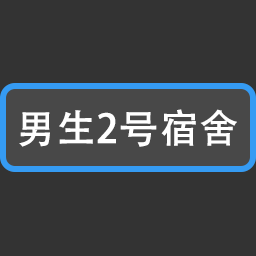
<style>
.page{position:relative;width:256px;height:256px;background:#333333}
.page>*{position:absolute;margin:0}
.t1{font:39px "AdobeHeitiStd-Regular";color:#ffffff;font-weight:bold}
</style>
<div class="page">
<p class="t1" style="left:19px;top:109px;width:218px;height:38px">男生2号宿舍</p>
</div>
